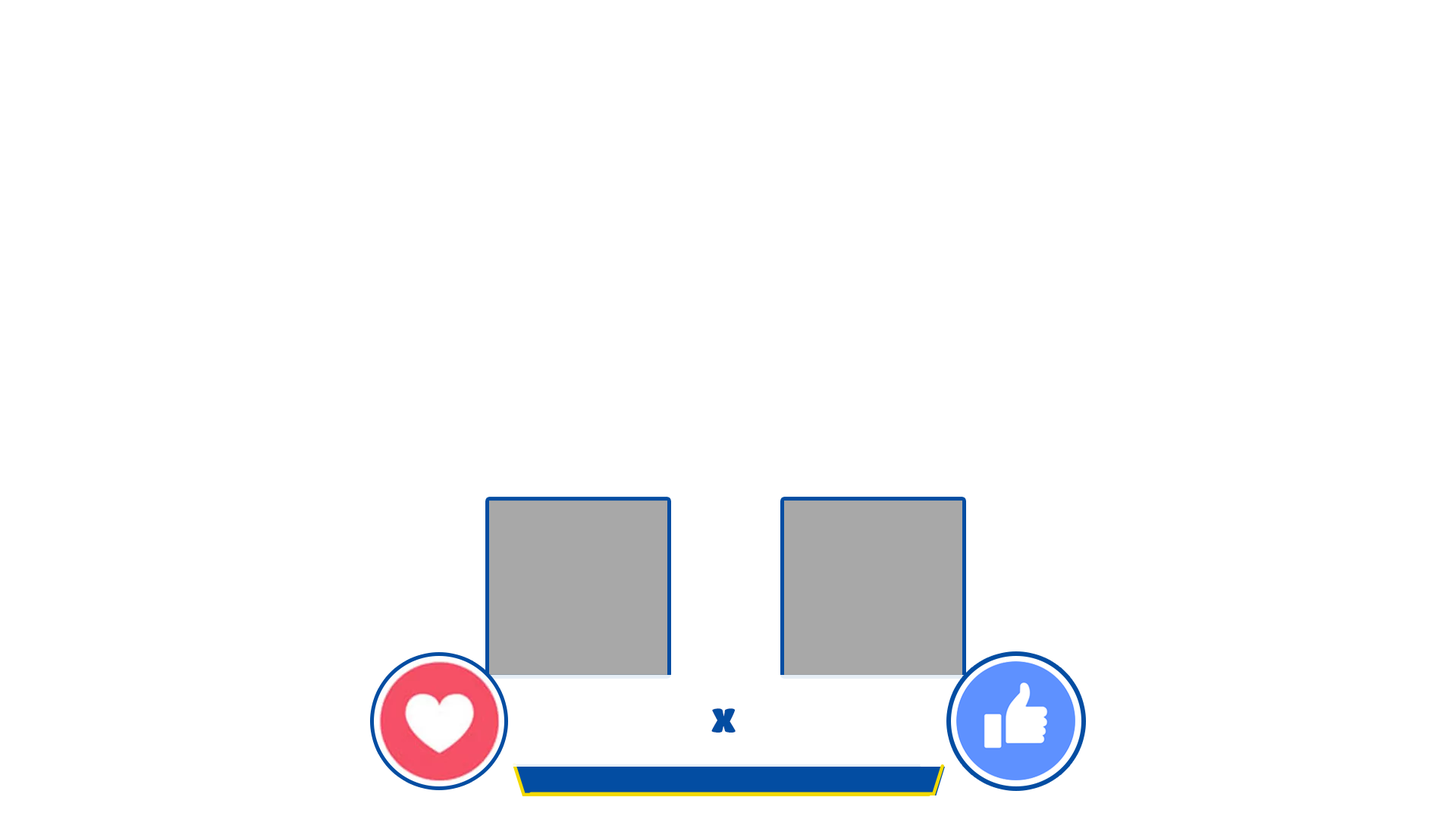
<style>
.page{position:relative;width:1456px;height:819px;background:#ffffff}
.page>*{position:absolute;margin:0}
.t1{font:33.8px "TitanOne";color:#034da2}
</style>
<div class="page">
<p class="t1" style="left:711px;top:708px;width:25px;height:25px">X</p>
</div>
